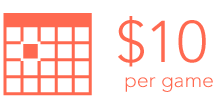
<style>
.page{position:relative;width:218px;height:110px;background:#ffffff}
.page>*{position:absolute;margin:0}
.t1{font:20.8px/25px "AvenirLTPro-Light";color:#ff6950}
.t2{font:58.3px/25px "AvenirLTPro-Light";color:#ff6950}
</style>
<div class="page">
<p class="t1" style="left:118px;top:16px;width:95px;height:76px;text-align:center"><span class="t2">$10 <br></span>per game</p>
</div>
